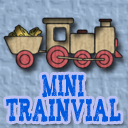
<style>
.page{position:relative;width:128px;height:128px}
.page>*{position:absolute;margin:0}
.t1{font:26px "Tiza";letter-spacing:0.06em;color:#0058db;scale:0.43 1}
.t2{font:26px "Tiza";letter-spacing:0.06em;color:#0058db;scale:0.48 1}
</style>
<div class="page">
<p class="t1" style="left:42px;top:74px;width:42px;height:24px">Mini</p>
<p class="t2" style="left:6px;top:98px;width:115px;height:24px">trainvial</p>
</div>
